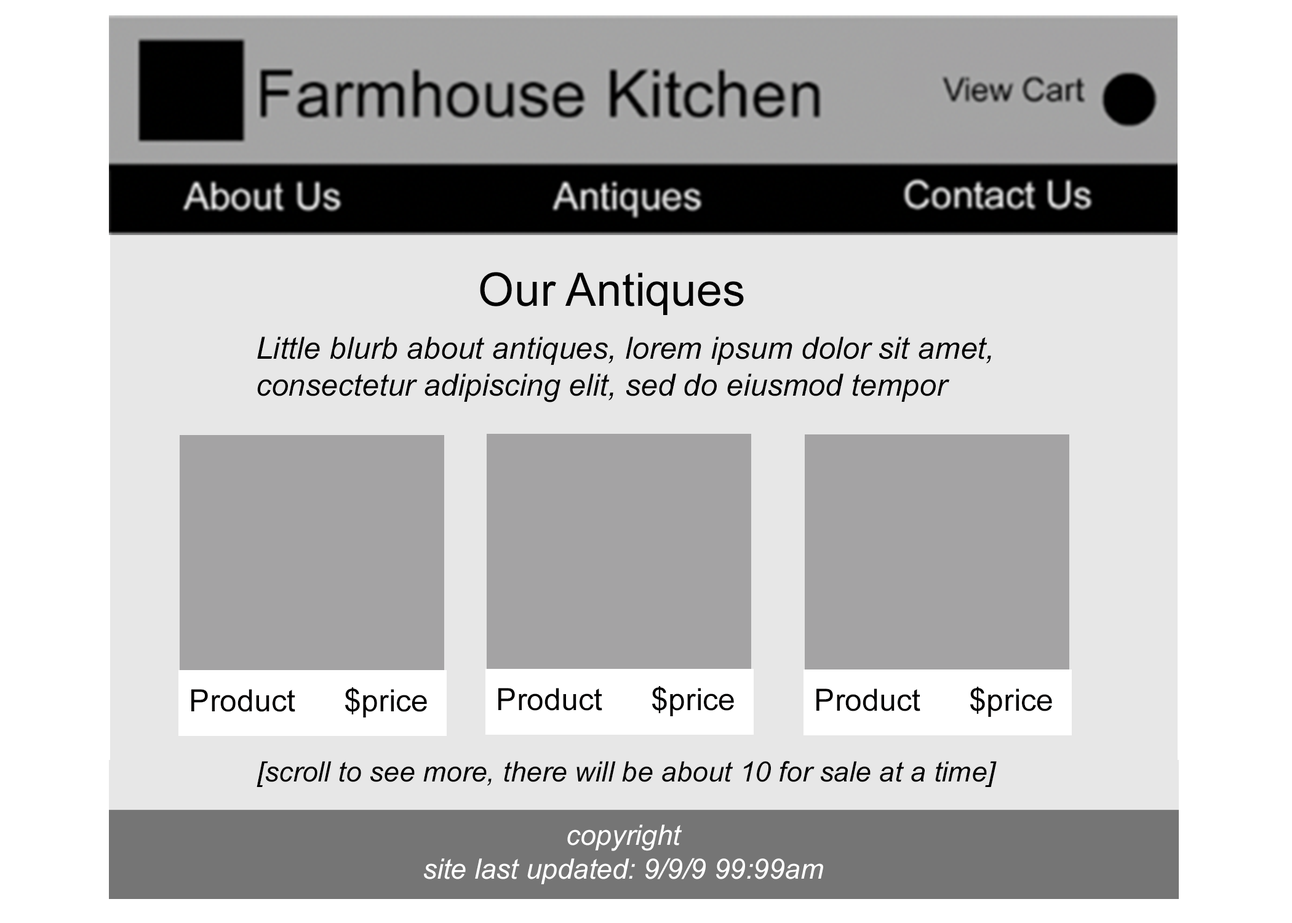
<style>
.page{position:relative;width:1292px;height:923px;background:#e7e7e7}
.page>*{position:absolute;margin:0}
.t1{font:46.1px "ArialMT";color:#000000}
.t2{font:30.8px "Arial-ItalicMT";color:#000000}
.t3{font:28.2px "Arial-ItalicMT";color:#000000}
.t4{font:28.2px "Arial-ItalicMT";color:#ffffff}
</style>
<div class="page">
<p class="t1" style="left:480px;top:272px;width:264px;height:43px">Our Antiques</p>
<p class="t2" style="left:257px;top:337px;width:734px;height:65px">Little blurb about antiques, lorem ipsum dolor sit amet,<br>consectetur adipiscing elit, sed do eiusmod tempor</p>
<p class="t3" style="left:257px;top:760px;width:740px;height:27px">[scroll to see more, there will be about 10 for sale at a time]</p>
<p class="t4" style="left:424px;top:824px;width:399px;height:60px;text-align:center">copyright<br>site last updated: 9/9/9 99:99am</p>
</div>
